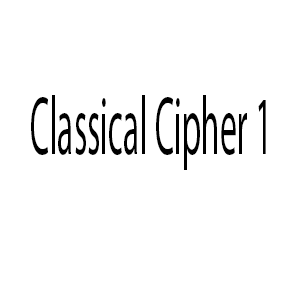
<style>
.page{position:relative;width:300px;height:300px;background:#ffffff}
.page>*{position:absolute;margin:0}
.t1{font:82.7px "MyriadPro-Regular";color:#000000;scale:0.41 1}
</style>
<div class="page">
<p class="t1" style="left:31px;top:95px;width:235px;height:75px">Classical Cipher 1</p>
</div>
